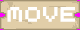
<style>
.page{position:relative;width:80px;height:30px;background:#e1cea8}
.page>*{position:absolute;margin:0}
.t1{font:19px "Pixel";color:#ffffff}
</style>
<div class="page">
<p class="t1" style="left:7px;top:7px;width:68px;height:15px">MOVE</p>
</div>
